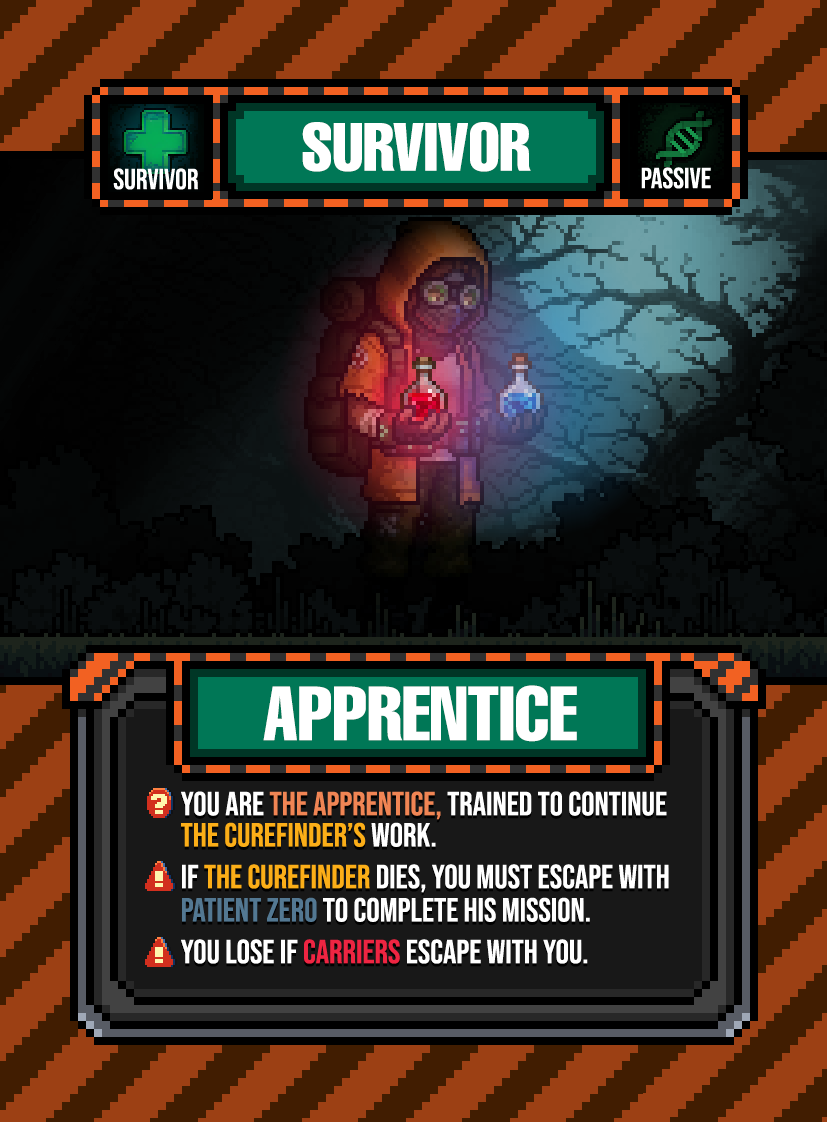
<style>
.page{position:relative;width:827px;height:1122px}
.page>*{position:absolute;margin:0}
.t1{font:66.7px "HelveticaLTPro-Compressed";color:#ffffff}
.t2{font:75px "HelveticaLTPro-Compressed";color:#ffffff}
.t3{font:33.3px/41.7px "BebasNeue-Regular";color:#ffffff}
.t4{font:33.3px/31.2px "BebasNeue-Regular";color:#ffffff}
.t5{font:33.3px/33.3px "BebasNeue-Regular";color:#f08554}
.t6{font:33.3px/31.2px "BebasNeue-Regular";color:#fbae18}
.t7{font:33.3px/41.7px "BebasNeue-Regular";color:#fbae18}
.t8{font:33.3px/33.3px "BebasNeue-Regular";color:#537892}
.t9{font:33.3px/33.3px "BebasNeue-Regular";color:#ffffff}
.t10{font:33.3px/41.7px "BebasNeue-Regular";color:#ee2542}
</style>
<div class="page">
<p class="t1" style="left:302px;top:122px;width:229px;height:50px">SURVIVOR</p>
<p class="t2" style="left:263px;top:685px;width:314px;height:57px">APPRENTICE</p>
<p class="t3" style="left:181px;top:791px;width:488px;height:173px"><span class="t4">You are </span><span class="t5">the Apprentice, </span><span class="t4">trained to continue </span><span class="t6">the Curefinder’s</span><span class="t4"> work.<br></span>If <span class="t7">the Curefinder</span> DIEs, you must escape with <span class="t8">Patient Zero </span><span class="t9">to complete his mission. <br></span>You lose if <span class="t10">Carriers</span> escape with you.</p>
</div>
